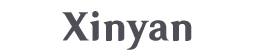
<style>
.page{position:relative;width:256px;height:56px;background:#ffffff}
.page>*{position:absolute;margin:0}
.t1{font:36px "HYWenHei-HEW";color:#4f4e57}
</style>
<div class="page">
<p class="t1" style="left:62px;top:11px;width:130px;height:39px">Xinyan</p>
</div>
